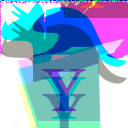
<style>
.page{position:relative;width:128px;height:128px;background:#ffffff}
.page>*{position:absolute;margin:0}
.t1{font:66.2px "YaleNew-Bold"}
</style>
<div class="page">
<p class="t1" style="left:42px;top:76px;width:44px;height:42px">Y</p>
</div>
